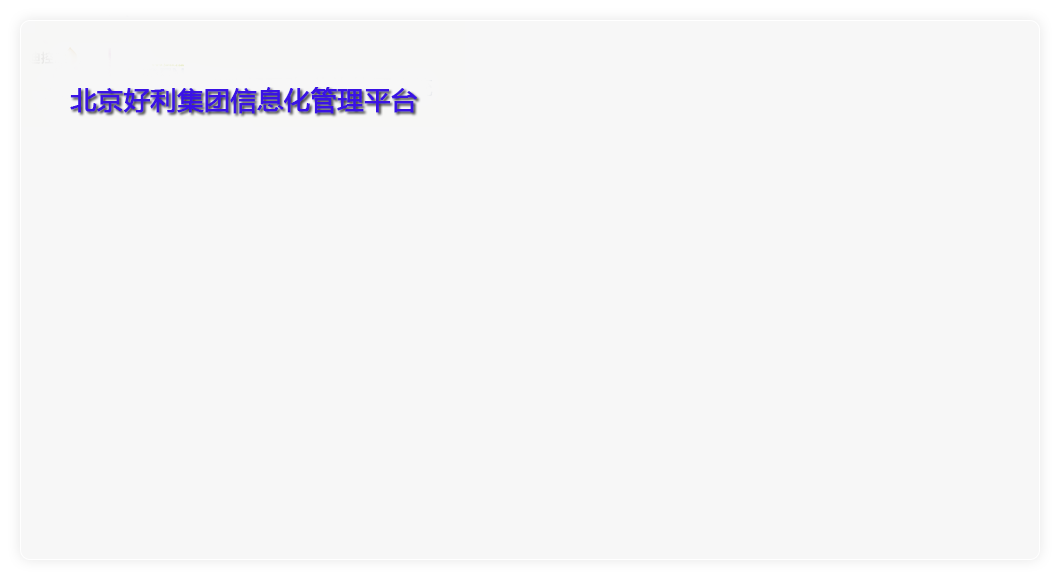
<style>
.page{position:relative;width:1060px;height:580px;background:#f7f7f7}
.page>*{position:absolute;margin:0}
.t1{font:26px "MicrosoftYaHei";color:#3a12e5;font-weight:bold}
</style>
<div class="page">
<p class="t1" style="left:70px;top:87px;width:347px;height:27px">北京好利集团信息化管理平台</p>
</div>
